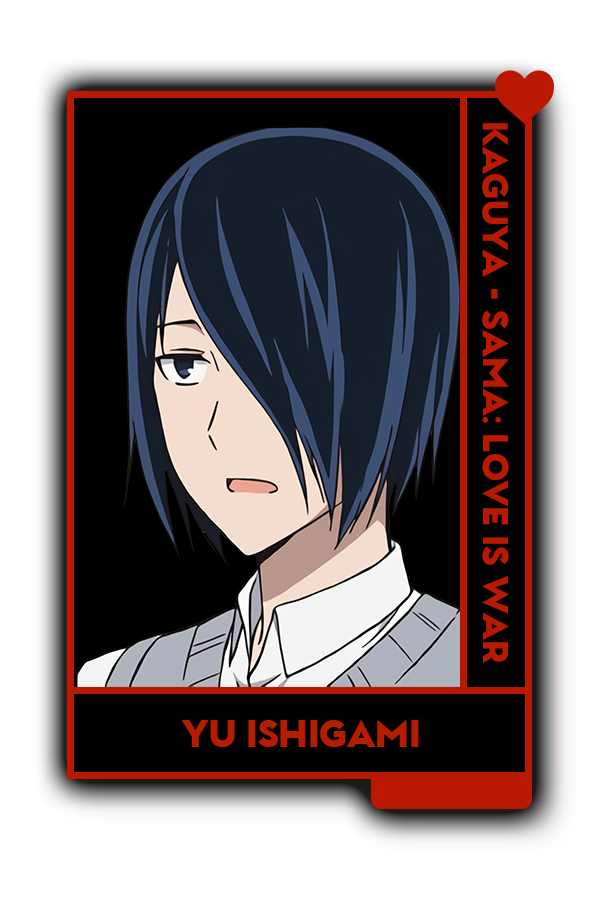
<style>
.page{position:relative;width:600px;height:900px;background:#000000}
.page>*{position:absolute;margin:0}
.t1{font:34px "GarnetCapitalsBlack-Regular";color:#b52616}
.t2{font:35.7px "GarnetCapitalsBlack-Regular";color:#b22818}
</style>
<div class="page">
<p class="t1" style="left:482px;top:123px;width:27px;height:540px;rotate:90deg">Kaguya - Sama: Love is war</p>
<p class="t2" style="left:182px;top:720px;width:237px;height:27px">YU ISHIGAMI</p>
</div>
